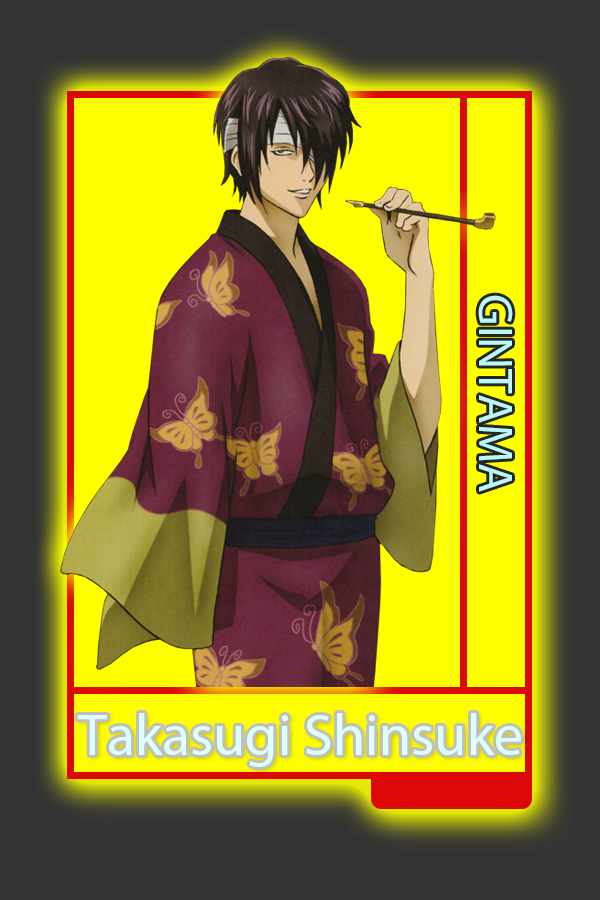
<style>
.page{position:relative;width:600px;height:900px;background:#ffff00}
.page>*{position:absolute;margin:0}
.t1{font:48.8px "MyriadPro-Regular";color:#b8f8f7}
.t2{font:58.3px "MyriadPro-Regular";color:#ddfffe}
</style>
<div class="page">
<p class="t1" style="left:478px;top:295px;width:35px;height:197px;rotate:90deg">GINTAMA</p>
<p class="t2" style="left:77px;top:713px;width:444px;height:54px">Takasugi Shinsuke</p>
</div>
